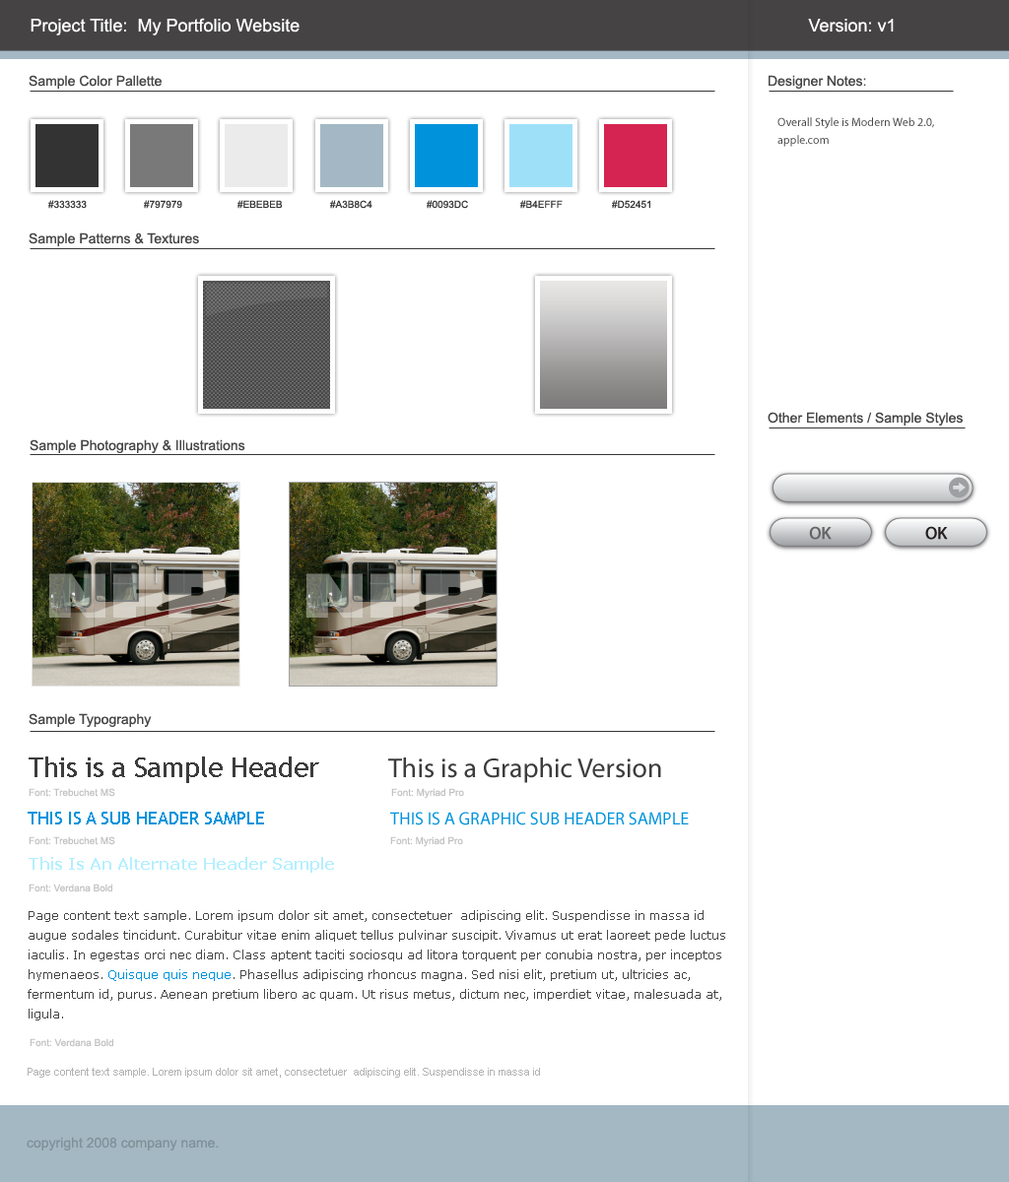
<style>
.page{position:relative;width:1009px;height:1182px;background:#ffffff}
.page>*{position:absolute;margin:0}
.t1{font:17.7px "ArialMT";color:#ffffff}
.t2{font:13.8px "ArialMT";color:#464646}
.t3{font:11.8px/17.7px "MyriadPro-Regular";color:#464646}
.t4{font:9.9px "ArialMT";color:#363636;text-transform:uppercase}
.t5{font:27.6px "TrebuchetMS";color:#3c3c3c}
.t6{font:27.6px "RosewoodStd-Regular";color:#3c3c3c}
.t7{font:9.9px "ArialMT";color:#c2c2c2}
.t8{font:17.7px "TrebuchetMS";color:#0093dc;text-transform:uppercase}
.t9{font:17.7px "MyriadPro-Regular";color:#0093dc;text-transform:uppercase}
.t10{font:15.8px "Verdana-Bold";color:#b4efff}
.t11{font:11.8px/19.7px "Verdana";color:#464646}
.t12{font:11.8px/19.7px "Verdana";color:#0093dc}
.t13{font:10.8px "ArialMT";color:#b3b3b2}
.t14{font:13.8px "ArialMT";color:#80919a}
</style>
<div class="page">
<p class="t1" style="left:31px;top:18px;width:268px;height:17px">Project Title:  My Portfolio Website</p>
<p class="t1" style="left:808px;top:19px;width:85px;height:14px">Version: v1</p>
<p class="t2" style="left:29px;top:75px;width:133px;height:14px">Sample Color Pallette</p>
<p class="t2" style="left:768px;top:75px;width:98px;height:14px">Designer Notes:</p>
<p class="t3" style="left:777px;top:117px;width:157px;height:30px">Overall Style is Modern Web 2.0, apple.com</p>
<p class="t4" style="left:48px;top:200px;width:39px;height:9px">#333333</p>
<p class="t4" style="left:144px;top:200px;width:38px;height:9px">#797979</p>
<p class="t4" style="left:237px;top:200px;width:46px;height:9px">#ebebeb</p>
<p class="t4" style="left:330px;top:200px;width:42px;height:9px">#a3b8c4</p>
<p class="t4" style="left:427px;top:200px;width:41px;height:9px">#0093dc</p>
<p class="t4" style="left:520px;top:200px;width:42px;height:9px">#b4efff</p>
<p class="t4" style="left:612px;top:200px;width:38px;height:9px">#d52451</p>
<p class="t2" style="left:29px;top:232px;width:170px;height:14px">Sample Patterns &amp; Textures</p>
<p class="t2" style="left:767px;top:412px;width:195px;height:14px">Other Elements / Sample Styles</p>
<p class="t2" style="left:30px;top:439px;width:215px;height:14px">Sample Photography &amp; Illustrations</p>
<p class="t2" style="left:29px;top:713px;width:123px;height:14px">Sample Typography</p>
<p class="t5" style="left:29px;top:757px;width:290px;height:26px">This is a Sample Header</p>
<p class="t6" style="left:388px;top:758px;width:273px;height:25px">This is a Graphic Version</p>
<p class="t7" style="left:29px;top:788px;width:86px;height:9px">Font: Trebuchet MS</p>
<p class="t7" style="left:391px;top:788px;width:73px;height:11px">Font: Myriad Pro</p>
<p class="t8" style="left:28px;top:812px;width:236px;height:13px">This Is A Sub Header Sample</p>
<p class="t9" style="left:390px;top:812px;width:299px;height:14px">This Is a graphic Sub Header Sample</p>
<p class="t7" style="left:29px;top:836px;width:86px;height:9px">Font: Trebuchet MS</p>
<p class="t7" style="left:390px;top:836px;width:73px;height:11px">Font: Myriad Pro</p>
<p class="t10" style="left:29px;top:857px;width:305px;height:16px">This Is An Alternate Header Sample</p>
<p class="t7" style="left:29px;top:884px;width:83px;height:8px">Font: Verdana Bold</p>
<p class="t11" style="left:28px;top:910px;width:697px;height:111px">Page content text sample. Lorem ipsum dolor sit amet, consectetuer  adipiscing elit. Suspendisse in massa id augue sodales tincidunt. Curabitur vitae enim aliquet tellus pulvinar suscipit. Vivamus ut erat laoreet pede luctus iaculis. In egestas orci nec diam. Class aptent taciti sociosqu ad litora torquent per conubia nostra, per inceptos hymenaeos. <span class="t12">Quisque quis neque</span>. Phasellus adipiscing rhoncus magna. Sed nisi elit, pretium ut, ultricies ac, fermentum id, purus. Aenean pretium libero ac quam. Ut risus metus, dictum nec, imperdiet vitae, malesuada at, ligula.</p>
<p class="t7" style="left:30px;top:1038px;width:83px;height:9px">Font: Verdana Bold</p>
<p class="t13" style="left:28px;top:1068px;width:512px;height:10px">Page content text sample. Lorem ipsum dolor sit amet, consectetuer  adipiscing elit. Suspendisse in massa id</p>
<p class="t14" style="left:27px;top:1137px;width:192px;height:14px">copyright 2008 company name.</p>
</div>
